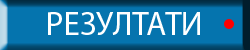
<style>
.page{position:relative;width:250px;height:50px;background:#0574ae}
.page>*{position:absolute;margin:0}
.t1{font:33px "MyriadPro-Regular";color:#ffffff}
</style>
<div class="page">
<p class="t1" style="left:48px;top:12px;width:152px;height:23px">РЕЗУЛТАТИ</p>
</div>
